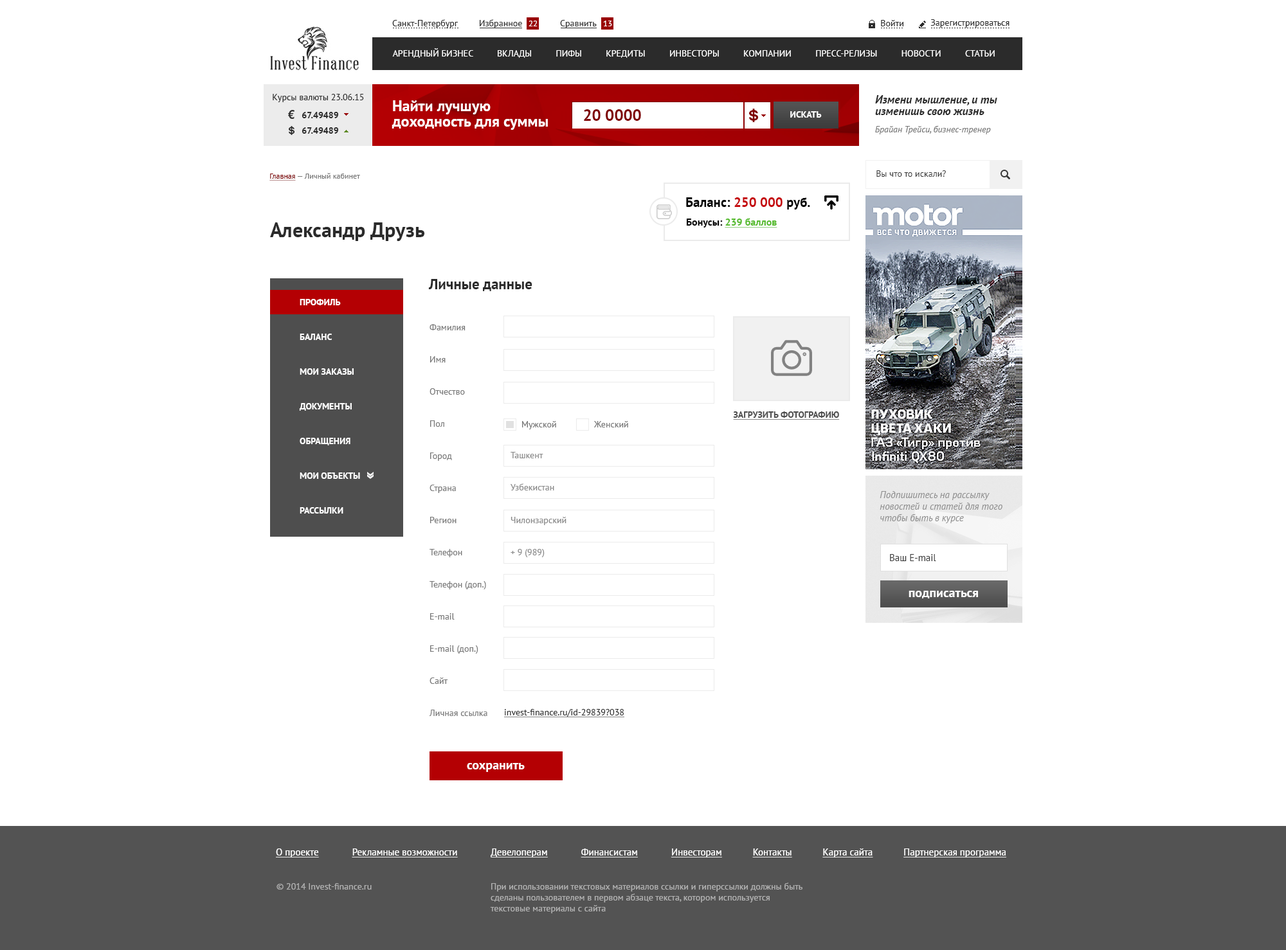
<style>
.page{position:relative;width:1286px;height:950px;background:#ffffff}
.page>*{position:absolute;margin:0}
.t1{font:9px "PTSans-Regular";color:#2b2b2b}
.t2{font:8.4px "PTSans-Regular";color:#ffffff}
.t3{font:9px "PTSans-Regular";color:#ffffff;text-transform:uppercase}
.t4{font:15.4px/15.4px "PTSans-Bold";color:#ffffff}
.t5{font:11.6px/11.6px "PTSans-BoldItalic";color:#2b2b2b}
.t6{font:9px/15.4px "PTSans-Bold";color:#2b2b2b}
.t7{font:16.1px "PTSans-Bold";color:#7f0002}
.t8{font:9px "PTSans-Bold";color:#ffffff;text-transform:uppercase}
.t9{font:9px "PTSans-Italic";color:#777777}
.t10{font:7.7px "PTSans-Regular";color:#777777}
.t11{font:7.7px "PTSans-Regular";color:#7f0002;text-decoration:underline}
.t12{font:13.5px "PTSans-Bold";color:#040404}
.t13{font:13.5px "PTSans-Bold";color:#c50a0e}
.t14{font:10.3px "PTSans-Bold";color:#56bb2e;text-decoration:underline}
.t15{font:10.3px "PTSans-Bold";color:#040404}
.t16{font:20.6px "PTSans-Bold";color:#2b2b2b}
.t17{font:14.8px "PTSans-Bold";color:#2b2b2b}
.t18{font:9px/11.6px "PTSans-Bold";color:#ffffff;text-transform:uppercase}
.t19{font:9px/32.1px "PTSans-Regular";color:#777777}
.t20{font:9px "PTSans-Bold";color:#4e4e4e;text-transform:uppercase;text-decoration:underline}
.t21{font:9px "PTSans-Regular";color:#777777}
.t22{font:9px "PTSans-Regular";color:#888888}
.t23{font:9.6px/11.6px "PTSans-Italic";color:#777777}
.t24{font:9.6px "PTSans-Regular";color:#2b2b2b}
.t25{font:12.9px "PTSans-Bold";color:#ffffff}
.t26{font:9px "PTSans-Regular";color:#2b2b2b;text-decoration:underline}
.t27{font:9.6px "PTSans-Regular";color:#ffffff;text-decoration:underline}
.t28{font:9px "PTSans-Regular";color:#9b9b9b}
</style>
<div class="page">
<p class="t1" style="left:392px;top:19px;width:66px;height:9px">Санкт-Петербург</p>
<p class="t1" style="left:480px;top:19px;width:42px;height:9px">Избранное</p>
<p class="t2" style="left:528px;top:21px;width:9px;height:5px">22</p>
<p class="t1" style="left:560px;top:20px;width:37px;height:8px">Сравнить</p>
<p class="t2" style="left:603px;top:21px;width:9px;height:5px">13</p>
<p class="t1" style="left:881px;top:20px;width:22px;height:6px">Войти</p>
<p class="t1" style="left:930px;top:19px;width:79px;height:9px">Зарегистрироваться</p>
<p class="t3" style="left:392px;top:48px;width:603px;height:10px">Арендный бизнес          Вклады          Пифы          Кредиты          Инвесторы          Компании          Пресс-релизы          Новости          Статьи</p>
<p class="t1" style="left:273px;top:94px;width:91px;height:8px">Курсы валюты 23.06.15</p>
<p class="t4" style="left:392px;top:100px;width:156px;height:30px">Найти лучшую<br>доходность для суммы</p>
<p class="t5" style="left:875px;top:95px;width:122px;height:20px">Измени мышление, и ты<br>изменишь свою жизнь</p>
<p class="t6" style="left:302px;top:112px;width:37px;height:22px">67.49489<br>67.49489</p>
<p class="t7" style="left:584px;top:109px;width:57px;height:12px">20 0000</p>
<p class="t8" style="left:790px;top:111px;width:32px;height:7px">Искать</p>
<p class="t9" style="left:875px;top:125px;width:116px;height:9px">Брайан Трейси, бизнес-тренер</p>
<p class="t10" style="left:269px;top:173px;width:91px;height:8px"><span class="t11">Главная </span>— Личный кабинет</p>
<p class="t1" style="left:876px;top:170px;width:70px;height:7px">Вы что то искали?</p>
<p class="t12" style="left:686px;top:197px;width:124px;height:13px">Баланс: <span class="t13">250 000</span> руб.</p>
<p class="t14" style="left:686px;top:218px;width:91px;height:10px"><span class="t15">Бонусы: </span>239 баллов</p>
<p class="t16" style="left:270px;top:222px;width:154px;height:19px">Александр Друзь</p>
<p class="t17" style="left:428px;top:279px;width:104px;height:12px">Личные данные</p>
<p class="t18" style="left:299px;top:299px;width:61px;height:215px">Профиль<br> <br><br>Баланс<br> <br><br>Мои заказы<br> <br> <br>Документы<br> <br><br>Обращения<br> <br><br>Мои объекты<br> <br><br>Рассылки</p>
<p class="t19" style="left:429px;top:324px;width:58px;height:392px">Фамилия<br>Имя<br>Отчество<br>Пол<br>Город<br>Страна <br>Регион<br>Телефон<br>Телефон (доп.)<br>E-mail<br>E-mail (доп.)<br>Сайт<br>Личная ссылка</p>
<p class="t20" style="left:733px;top:411px;width:107px;height:9px">Загрузить фотографию</p>
<p class="t21" style="left:522px;top:421px;width:34px;height:8px">Мужской</p>
<p class="t21" style="left:593px;top:421px;width:35px;height:7px">Женский</p>
<p class="t22" style="left:510px;top:452px;width:33px;height:6px">Ташкент</p>
<p class="t22" style="left:510px;top:483px;width:44px;height:8px">Узбекистан</p>
<p class="t23" style="left:879px;top:491px;width:123px;height:32px">Подпишитесь на рассылку<br>новостей и статей для того<br>чтобы быть в курсе</p>
<p class="t22" style="left:510px;top:517px;width:56px;height:8px">Чилонзарский</p>
<p class="t22" style="left:510px;top:549px;width:34px;height:8px">+ 9 (989)</p>
<p class="t24" style="left:890px;top:554px;width:46px;height:7px">Ваш E-mail</p>
<p class="t25" style="left:908px;top:591px;width:70px;height:7px">подписаться</p>
<p class="t26" style="left:504px;top:709px;width:120px;height:8px">invest-finance.ru/id-29839?038</p>
<p class="t25" style="left:467px;top:763px;width:58px;height:9px">сохранить</p>
<p class="t27" style="left:276px;top:849px;width:730px;height:9px">О проекте             Рекламные возможности             Девелоперам             Финансистам             Инвесторам            Контакты            Карта сайта            Партнерская программа</p>
<p class="t28" style="left:276px;top:883px;width:96px;height:7px">© 2014 Invest-finance.ru</p>
<p class="t28" style="left:490px;top:883px;width:312px;height:31px">При использовании текстовых материалов ссылки и гиперссылки должны быть <br>сделаны пользователем в первом абзаце текста, котором используется<br>текстовые материалы с сайта</p>
</div>
